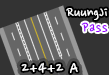
<style>
.page{position:relative;width:109px;height:75px;background:#333333}
.page>*{position:absolute;margin:0}
.t1{font:16px "NanumPen";color:#ffffff}
.t2{font:16px "NanumPen";letter-spacing:0.05em;color:#9900ff}
.t3{font:18px "NanumPen";letter-spacing:0.05em;color:#ffffff}
</style>
<div class="page">
<p class="t1" style="left:66px;top:8px;width:42px;height:12px">RuungJi</p>
<p class="t2" style="left:81px;top:22px;width:27px;height:10px">Pass</p>
<p class="t3" style="left:21px;top:62px;width:57px;height:11px">2+4+2 A</p>
</div>
